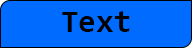
<style>
.page{position:relative;width:192px;height:48px;background:#006cff}
.page>*{position:absolute;margin:0}
.t1{font:32px "Consolas-Bold";color:#000000}
</style>
<div class="page">
<p class="t1" style="left:62px;top:11px;width:68px;height:21px">Text</p>
</div>
